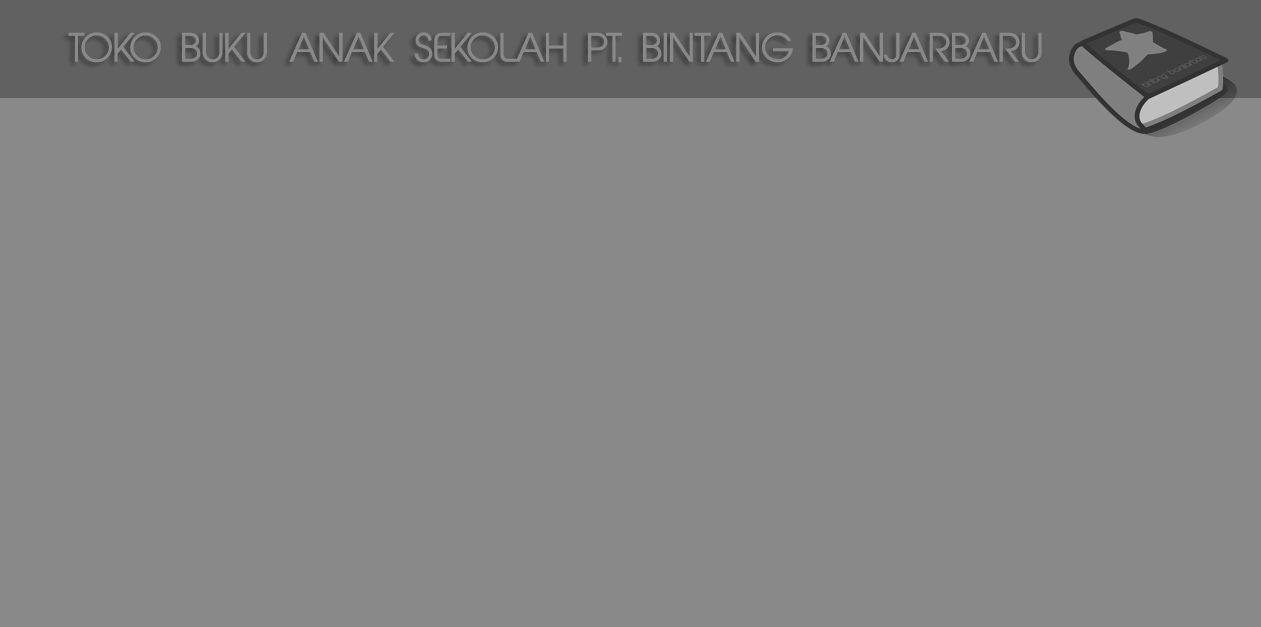
<style>
.page{position:relative;width:1261px;height:627px;background:#898989}
.page>*{position:absolute;margin:0}
.t1{font:37.3px "AbeatbyKai";color:#898989}
</style>
<div class="page">
<p class="t1" style="left:68px;top:32px;width:974px;height:31px">TOKO BUKU ANAK SEKOLAH PT. BINTANG BANJARBARU</p>
</div>
